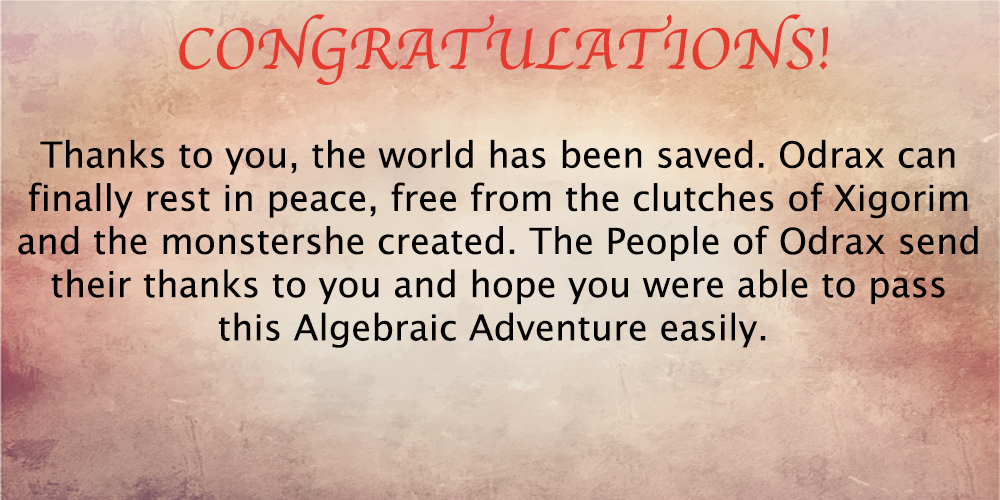
<style>
.page{position:relative;width:1000px;height:500px}
.page>*{position:absolute;margin:0}
.t1{font:60px "Apple-Chancery";color:#e63a2e}
.t2{font:36px "LucidaGrande";color:#000100}
</style>
<div class="page">
<p class="t1" style="left:179px;top:14px;width:649px;height:71px">CONGRATULATIONS!</p>
<p class="t2" style="left:18px;top:139px;width:960px;height:209px;text-align:center">Thanks to you, the world has been saved. Odrax can<br>finally rest in peace, free from the clutches of Xigorim<br>and the monstershe created. The People of Odrax send<br>their thanks to you and hope you were able to pass<br>this Algebraic Adventure easily.</p>
</div>
